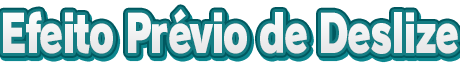
<style>
.page{position:relative;width:460px;height:72px;background:#ffffff}
.page>*{position:absolute;margin:0}
.t1{font:52px "RodinPro-UB";letter-spacing:-0.039em;color:#f0f0f1;scale:0.73 1}
</style>
<div class="page">
<p class="t1" style="left:3px;top:9px;width:455px;height:45px">Efeito Prévio de Deslize</p>
</div>
